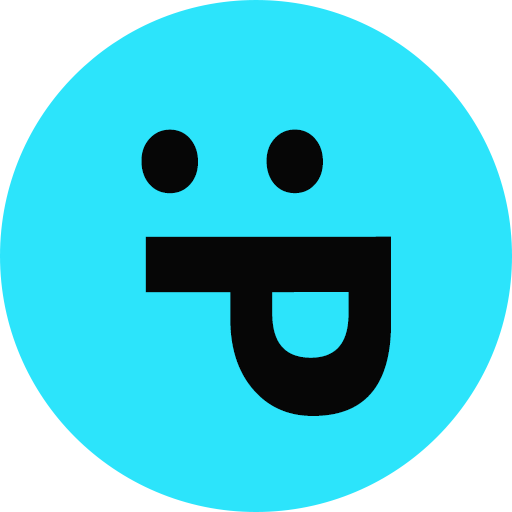
<style>
.page{position:relative;width:512px;height:512px;background:#2ce4fb}
.page>*{position:absolute;margin:0}
.t1{font:350px "MicrosoftNewTaiLue-Bold";color:#060606}
</style>
<div class="page">
<p class="t1" style="left:141px;top:129px;width:250px;height:287px;rotate:90deg">:P</p>
</div>
